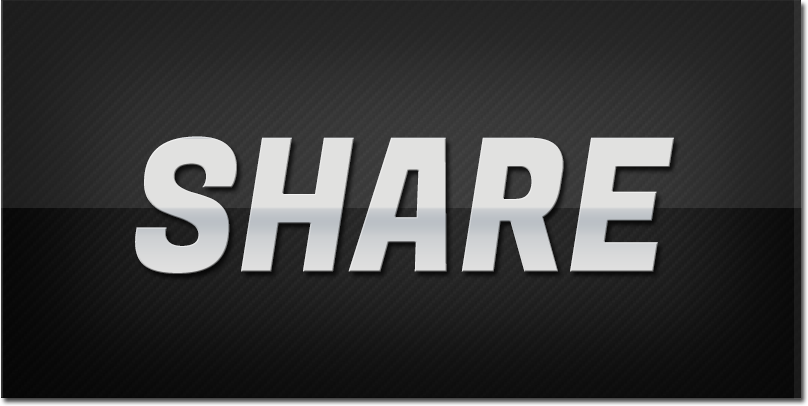
<style>
.page{position:relative;width:808px;height:406px}
.page>*{position:absolute;margin:0}
.t1{font:185.2px "FugazOne-Regular";color:#dfdfdf;scale:0.89 1}
</style>
<div class="page">
<p class="t1" style="left:135px;top:136px;width:539px;height:138px">SHARE</p>
</div>
